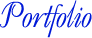
<style>
.page{position:relative;width:92px;height:38px;background:#ffffff}
.page>*{position:absolute;margin:0}
.t1{font:36px "UkrainianDecor";color:#0019d7}
</style>
<div class="page">
<p class="t1" style="left:0px;top:0px;width:92px;height:38px">Portfolio</p>
</div>
